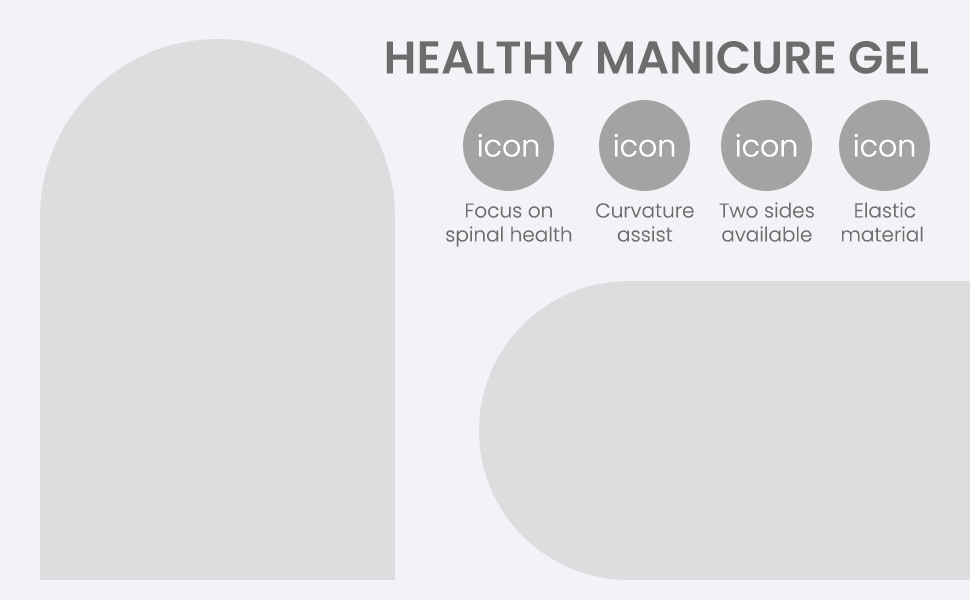
<style>
.page{position:relative;width:970px;height:600px;background:#dcdddf}
.page>*{position:absolute;margin:0}
.t1{font:46px "Poppins-SemiBold";color:#6c6c6c;text-transform:uppercase}
.t2{font:30px "Poppins-Light";color:#ffffff}
.t3{font:20px "Poppins-Light";color:#6c6c6c}
</style>
<div class="page">
<p class="t1" style="left:386px;top:41px;width:542px;height:33px">Healthy Manicure Gel</p>
<p class="t2" style="left:478px;top:133px;width:61px;height:24px">icon</p>
<p class="t2" style="left:614px;top:133px;width:61px;height:24px">icon</p>
<p class="t2" style="left:736px;top:133px;width:61px;height:24px">icon</p>
<p class="t2" style="left:854px;top:133px;width:61px;height:24px">icon</p>
<p class="t3" style="left:446px;top:203px;width:126px;height:44px;text-align:center">Focus on<br>spinal health</p>
<p class="t3" style="left:596px;top:203px;width:98px;height:39px;text-align:center">Curvature<br>assist</p>
<p class="t3" style="left:719px;top:202px;width:95px;height:40px;text-align:center">Two sides<br>available</p>
<p class="t3" style="left:842px;top:202px;width:81px;height:40px;text-align:center">Elastic<br>material</p>
</div>
